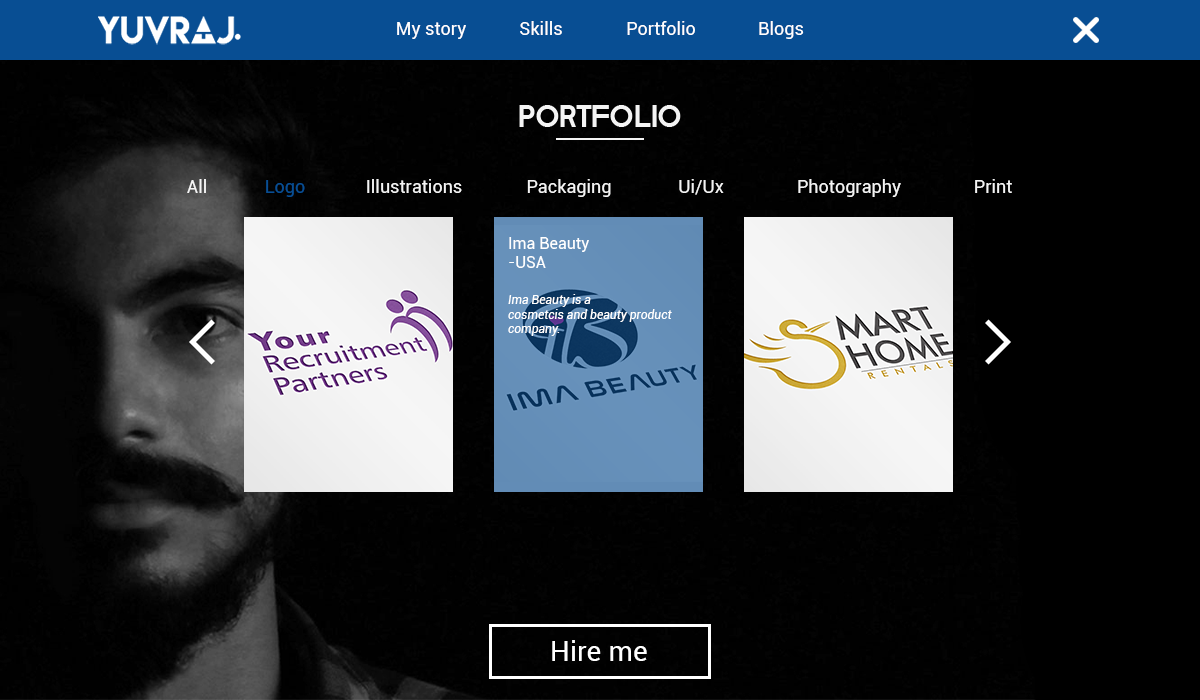
<style>
.page{position:relative;width:1200px;height:700px;background:#010101}
.page>*{position:absolute;margin:0}
.t1{font:18px "Roboto-Regular";color:#ffffff}
.t2{font:32px "GeBody";color:#f4f4f4}
.t3{font:18px "Roboto-Regular";color:#f4f4f4}
.t4{font:18px "Roboto-Regular";color:#084e93}
.t5{font:12px "Roboto-Italic";color:#ffffff}
.t6{font:16px "Roboto-Regular";color:#ffffff}
.t7{font:27.8px "Roboto-Regular";color:#ffffff}
</style>
<div class="page">
<p class="t1" style="left:397px;top:22px;width:69px;height:17px">My story</p>
<p class="t1" style="left:520px;top:21px;width:42px;height:14px">Skills</p>
<p class="t1" style="left:627px;top:21px;width:68px;height:14px">Portfolio</p>
<p class="t1" style="left:759px;top:21px;width:45px;height:18px">Blogs</p>
<p class="t2" style="left:519px;top:105px;width:162px;height:22px">portfolio</p>
<p class="t3" style="left:187px;top:179px;width:19px;height:14px">All</p>
<p class="t4" style="left:266px;top:180px;width:39px;height:17px">Logo</p>
<p class="t3" style="left:367px;top:179px;width:95px;height:14px">Illustrations</p>
<p class="t3" style="left:527px;top:179px;width:84px;height:18px">Packaging</p>
<p class="t3" style="left:679px;top:179px;width:45px;height:16px">Ui/Ux</p>
<p class="t3" style="left:798px;top:179px;width:103px;height:18px">Photography</p>
<p class="t3" style="left:975px;top:179px;width:37px;height:14px">Print</p>
<p class="t5" style="left:508px;top:237px;width:164px;height:99px"><span class="t6">Ima Beauty<br>-USA<br><br></span>Ima Beauty is a <br>cosmetcis and beauty product company.</p>
<p class="t7" style="left:552px;top:640px;width:95px;height:21px">Hire me</p>
</div>
